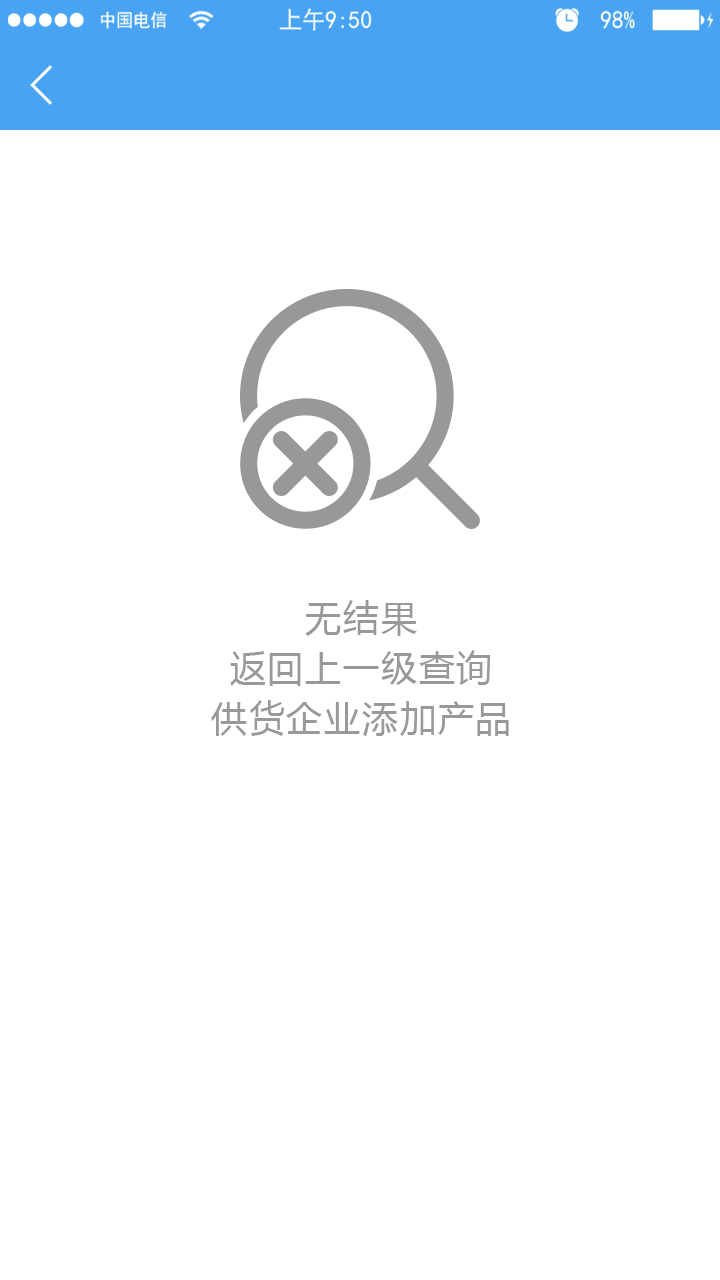
<style>
.page{position:relative;width:720px;height:1280px;background:#ffffff}
.page>*{position:absolute;margin:0}
.t1{font:36px/50px "MicrosoftYaHei";letter-spacing:0.05em;color:#999999}
</style>
<div class="page">
<p class="t1" style="left:211px;top:600px;width:298px;height:136px;text-align:center">无结果<br>返回上一级查询<br>供货企业添加产品</p>
</div>
